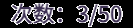
<style>
.page{position:relative;width:133px;height:28px;background:#000000}
.page>*{position:absolute;margin:0}
.t1{font:22px "WebPSD-18463539-0-Regular";color:#3f3254;font-weight:bold}
</style>
<div class="page">
<p class="t1" style="left:0px;top:0px;width:133px;height:28px">次数：3/50</p>
</div>
